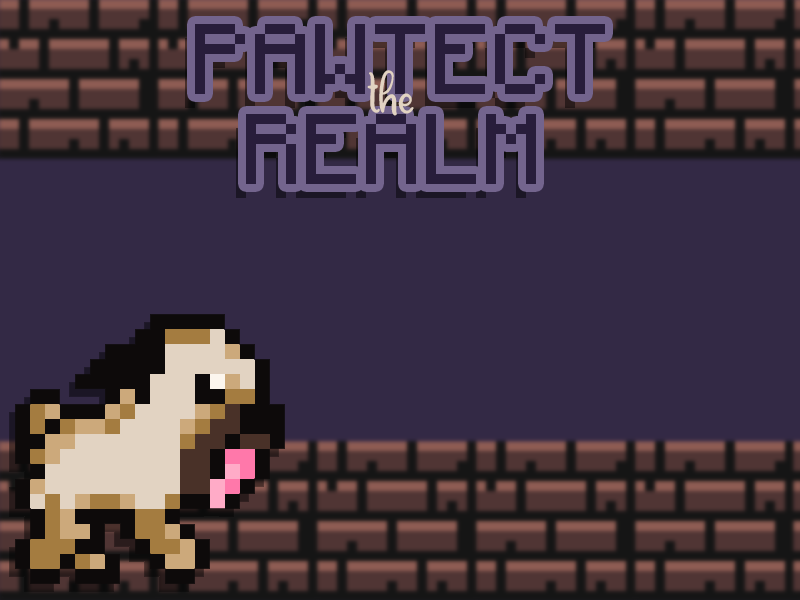
<style>
.page{position:relative;width:800px;height:600px;background:#332945}
.page>*{position:absolute;margin:0}
.t1{font:80px "Minecraftia-Regular";color:#281d3b}
.t2{font:65px "DreamUnicorn";color:#e2d3c2}
</style>
<div class="page">
<p class="t1" style="left:195px;top:24px;width:410px;height:70px">PAWTECT</p>
<p class="t2" style="left:367px;top:70px;width:47px;height:46px">the</p>
<p class="t1" style="left:246px;top:114px;width:290px;height:70px">REALM</p>
</div>
